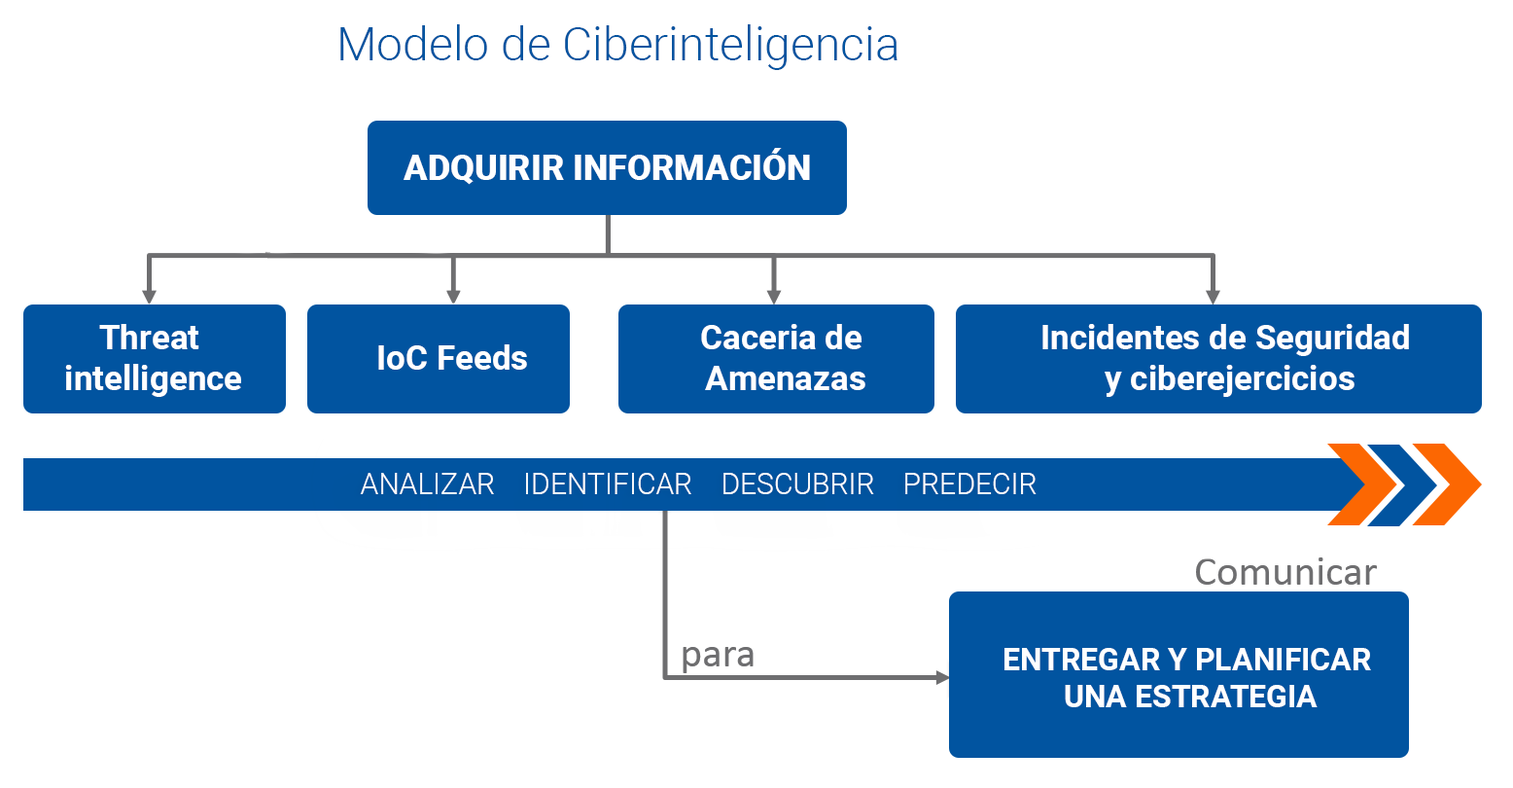
<style>
.page{position:relative;width:1513px;height:788px;background:#ffffff}
.page>*{position:absolute;margin:0}
.t1{font:46.7px "Roboto-Light";color:#0154a0}
.t2{font:46.7px "Roboto-Bold";color:#024075}
.t3{font:35px "Roboto-Black";color:#feffff;text-transform:uppercase}
.t4{font:34px "Roboto-Bold";color:#ffffff}
.t5{font:29.2px "Roboto-Light";color:#ffffff;text-transform:uppercase}
.t6{font:31.1px "Roboto-Bold";color:#ffffff;text-transform:uppercase}
</style>
<div class="page">
<p class="t1" style="left:340px;top:24px;width:558px;height:46px"><span class="t2"> </span>Modelo de Ciberinteligencia</p>
<p class="t3" style="left:404px;top:148px;width:406px;height:37px">Adquirir información</p>
<p class="t4" style="left:65px;top:324px;width:176px;height:73px;text-align:center">Threat <br>intelligence</p>
<p class="t4" style="left:701px;top:324px;width:165px;height:66px;text-align:center">Caceria de <br>Amenazas</p>
<p class="t4" style="left:1043px;top:324px;width:366px;height:73px;text-align:center">Incidentes de Seguridad <br>y ciberejercicios</p>
<p class="t4" style="left:378px;top:344px;width:149px;height:26px">IoC Feeds</p>
<p class="t5" style="left:360px;top:473px;width:677px;height:21px">Analizar    Identificar    Descubrir    Predecir</p>
<p class="t6" style="left:1005px;top:648px;width:366px;height:59px;text-align:center">Entregar y planificar <br>una estrategia</p>
</div>
